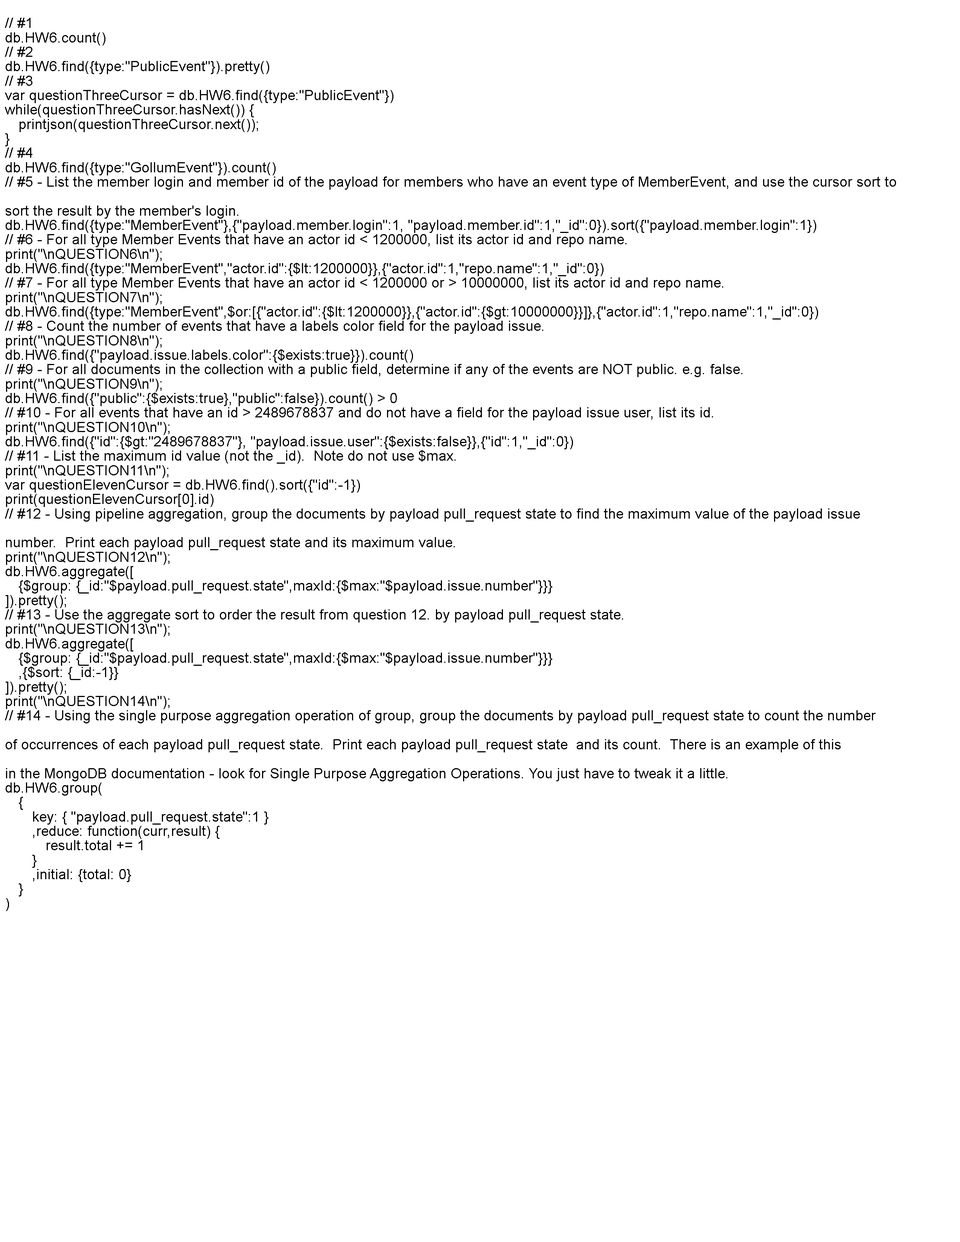
<style>
.page{position:relative;width:960px;height:1242px;background:#ffffff}
.page>*{position:absolute;margin:0}
.t1{font:14.1px/14.4px "ArialMT";color:#000000}
</style>
<div class="page">
<p class="t1" style="left:5px;top:18px;width:891px;height:893px">// #1<br>db.HW6.count()<br>// #2<br>db.HW6.find({type:"PublicEvent"}).pretty()<br>// #3 <br>var questionThreeCursor = db.HW6.find({type:"PublicEvent"})<br>while(questionThreeCursor.hasNext()) {<br> printjson(questionThreeCursor.next());<br>}<br>// #4<br>db.HW6.find({type:"GollumEvent"}).count()<br>// #5 - List the member login and member id of the payload for members who have an event type of MemberEvent, and use the cursor sort to <br><br>sort the result by the member's login.<br>db.HW6.find({type:"MemberEvent"},{"payload.member.login":1, "payload.member.id":1,"_id":0}).sort({"payload.member.login":1})<br>// #6 - For all type Member Events that have an actor id &lt; 1200000, list its actor id and repo name.<br>print("\nQUESTION6\n");<br>db.HW6.find({type:"MemberEvent","actor.id":{$lt:1200000}},{"actor.id":1,"repo.name":1,"_id":0})<br>// #7 - For all type Member Events that have an actor id &lt; 1200000 or &gt; 10000000, list its actor id and repo name.<br>print("\nQUESTION7\n");<br>db.HW6.find({type:"MemberEvent",$or:[{"actor.id":{$lt:1200000}},{"actor.id":{$gt:10000000}}]},{"actor.id":1,"repo.name":1,"_id":0})<br>// #8 - Count the number of events that have a labels color field for the payload issue.<br>print("\nQUESTION8\n");<br>db.HW6.find({"payload.issue.labels.color":{$exists:true}}).count()<br>// #9 - For all documents in the collection with a public field, determine if any of the events are NOT public. e.g. false. <br>print("\nQUESTION9\n");<br>db.HW6.find({"public":{$exists:true},"public":false}).count() &gt; 0<br>// #10 - For all events that have an id &gt; 2489678837 and do not have a field for the payload issue user, list its id. <br>print("\nQUESTION10\n");<br>db.HW6.find({"id":{$gt:"2489678837"}, "payload.issue.user":{$exists:false}},{"id":1,"_id":0})<br>// #11 - List the maximum id value (not the _id).  Note do not use $max.<br>print("\nQUESTION11\n");<br>var questionElevenCursor = db.HW6.find().sort({"id":-1})<br>print(questionElevenCursor[0].id)<br>// #12 - Using pipeline aggregation, group the documents by payload pull_request state to find the maximum value of the payload issue <br><br>number.  Print each payload pull_request state and its maximum value.<br>print("\nQUESTION12\n");<br>db.HW6.aggregate([<br> {$group: {_id:"$payload.pull_request.state",maxId:{$max:"$payload.issue.number"}}}<br>]).pretty();<br>// #13 - Use the aggregate sort to order the result from question 12. by payload pull_request state.<br>print("\nQUESTION13\n");<br>db.HW6.aggregate([<br> {$group: {_id:"$payload.pull_request.state",maxId:{$max:"$payload.issue.number"}}}<br> ,{$sort: {_id:-1}}<br>]).pretty();<br>print("\nQUESTION14\n");<br>// #14 - Using the single purpose aggregation operation of group, group the documents by payload pull_request state to count the number <br><br>of occurrences of each payload pull_request state.  Print each payload pull_request state  and its count.  There is an example of this <br><br>in the MongoDB documentation - look for Single Purpose Aggregation Operations. You just have to tweak it a little.<br>db.HW6.group(<br> {<br>  key: { "payload.pull_request.state":1 }<br>  ,reduce: function(curr,result) {<br>   result.total += 1<br>  }<br>  ,initial: {total: 0}<br> }<br>)</p>
</div>
